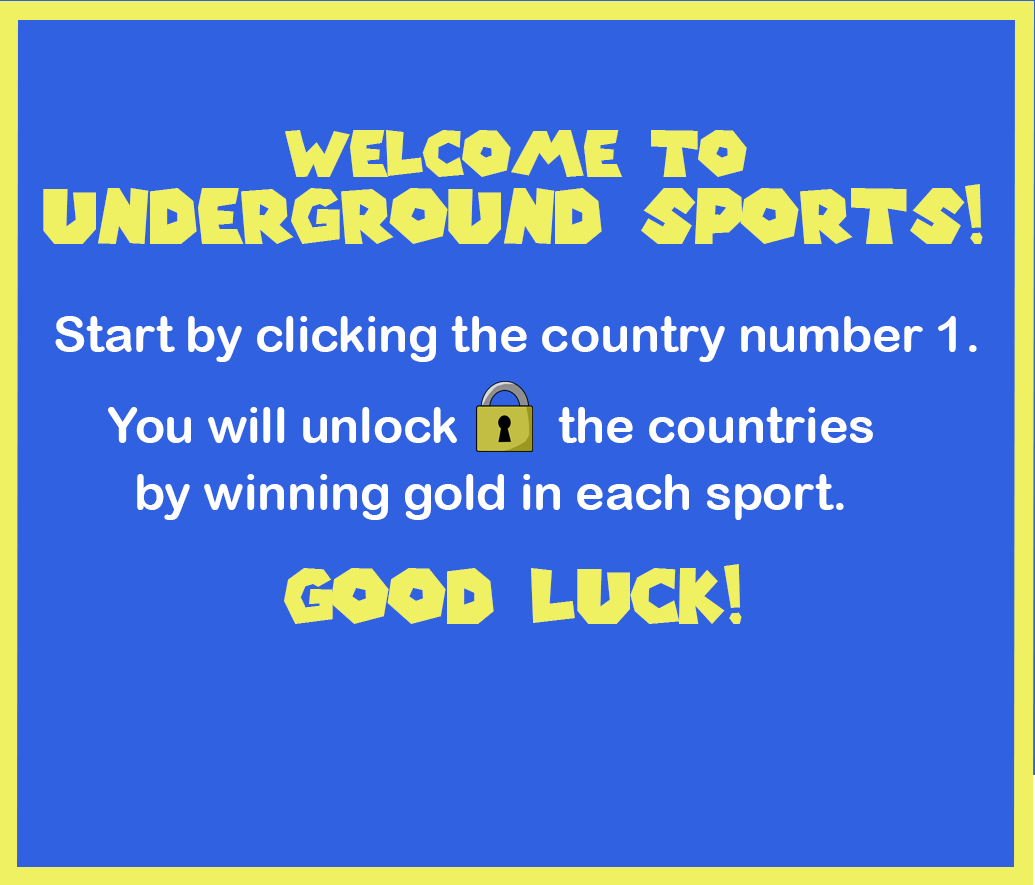
<style>
.page{position:relative;width:1035px;height:885px;background:#2f61e1}
.page>*{position:absolute;margin:0}
.t1{font:75px/66.8px "SuperMarioGalaxy";color:#eff163}
.t2{font:62.5px/66.8px "SuperMarioGalaxy";color:#eff163}
.t3{font:49.5px "ArialRoundedMTBold";color:#ffffff}
.t4{font:49.5px/66.8px "ArialRoundedMTBold";color:#ffffff}
.t5{font:74.5px "SuperMarioGalaxy";color:#eff163}
</style>
<div class="page">
<p class="t1" style="left:43px;top:130px;width:940px;height:114px;text-align:center"><span class="t2">Welcome to</span> <br>Underground Sports!</p>
<p class="t3" style="left:55px;top:316px;width:922px;height:46px">Start by clicking the country number 1.</p>
<p class="t4" style="left:108px;top:407px;width:765px;height:113px;text-align:center">You will unlock        the countries<br>by winning gold in each sport.</p>
<p class="t5" style="left:284px;top:564px;width:458px;height:60px">Good luck!</p>
</div>
